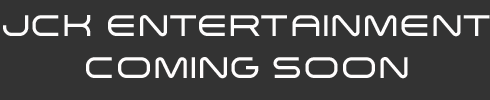
<style>
.page{position:relative;width:490px;height:100px;background:#333333}
.page>*{position:absolute;margin:0}
.t1{font:30px "Arkitech-Medium";color:#fdfcfc}
.t2{font:30px "Arkitech-Medium";color:#fffdfd}
</style>
<div class="page">
<p class="t1" style="left:3px;top:15px;width:487px;height:22px">JCK ENTERTAINMENT</p>
<p class="t2" style="left:86px;top:57px;width:322px;height:22px">COMING SOON</p>
</div>
